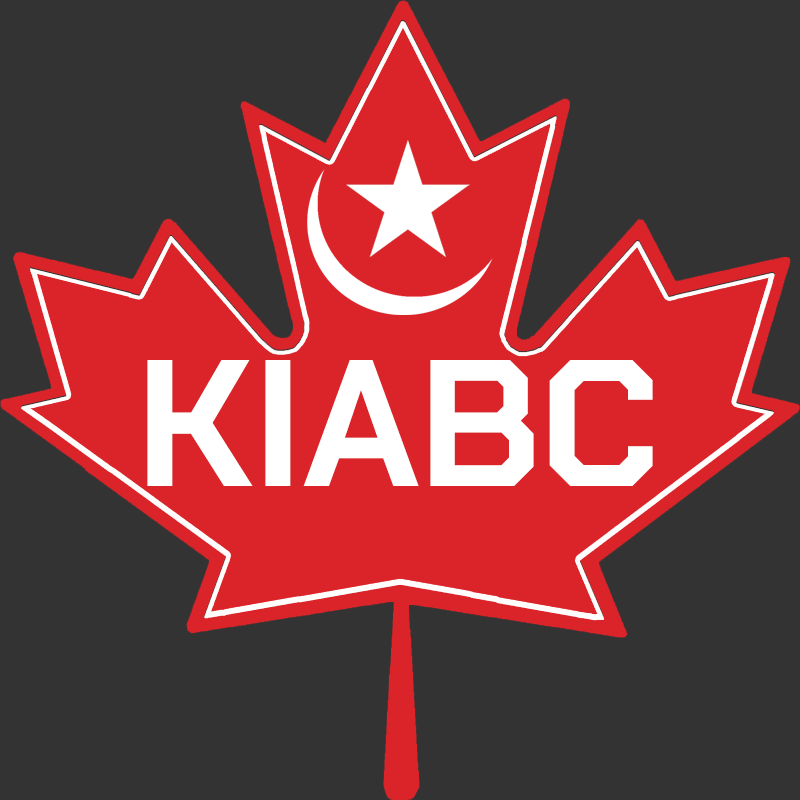
<style>
.page{position:relative;width:800px;height:800px;background:#333333}
.page>*{position:absolute;margin:0}
.t1{font:180px "ChakraPetch-Bold";color:#ffffff}
</style>
<div class="page">
<p class="t1" style="left:147px;top:360px;width:506px;height:126px">KIABC</p>
</div>
